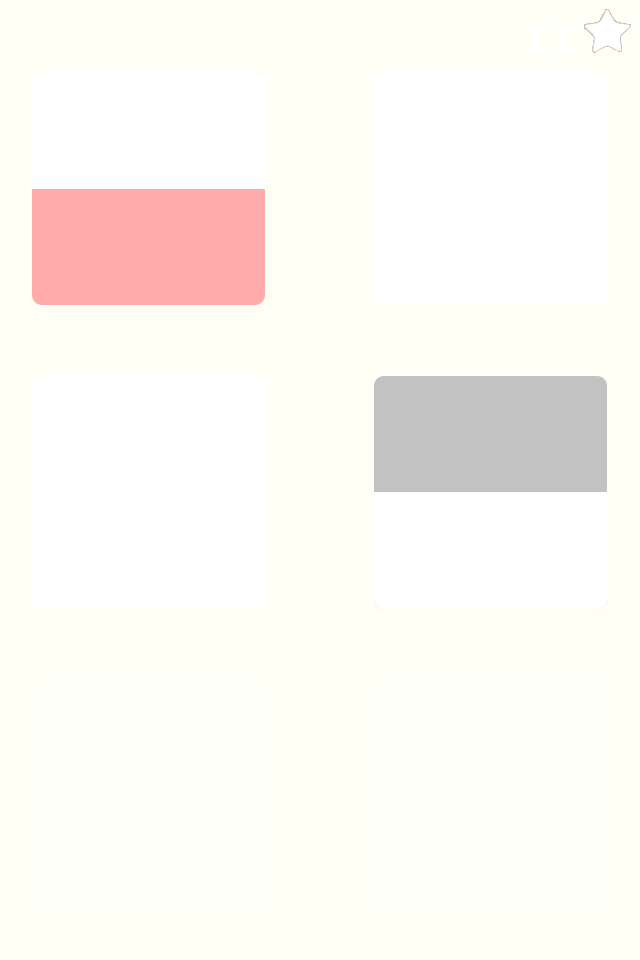
<style>
.page{position:relative;width:640px;height:960px;background:#fffff5}
.page>*{position:absolute;margin:0}
.t1{font:43px "Baskerville-Bold";color:#ffffff;text-transform:uppercase}
</style>
<div class="page">
<p class="t1" style="left:529px;top:22px;width:41px;height:31px">12</p>
</div>
